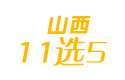
<style>
.page{position:relative;width:125px;height:80px;background:#ffffff}
.page>*{position:absolute;margin:0}
.t1{font:20.2px "FZZYJW--GB1-0";letter-spacing:0.075em;color:#ffbb04;font-style:italic}
.t2{font:31.1px "FZZQJW--GB1-0";color:#ffbb04;font-weight:bold;font-style:italic}
</style>
<div class="page">
<p class="t1" style="left:47px;top:15px;width:44px;height:19px">山西</p>
<p class="t2" style="left:21px;top:37px;width:86px;height:29px">11选5</p>
</div>
